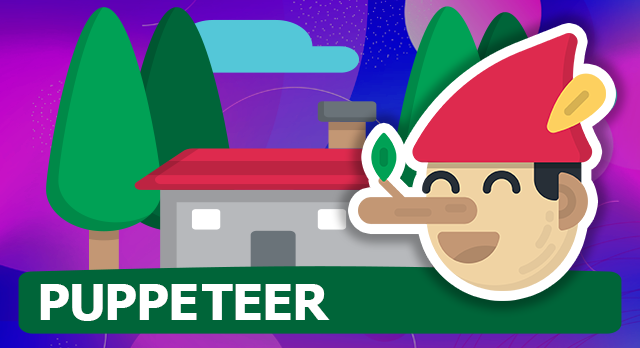
<style>
.page{position:relative;width:640px;height:348px}
.page>*{position:absolute;margin:0}
.t1{font:50.1px "Tahoma-Bold";color:#ffffff;text-transform:uppercase}
</style>
<div class="page">
<p class="t1" style="left:40px;top:284px;width:290px;height:37px">Puppeteer</p>
</div>
